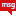
<style>
.page{position:relative;width:16px;height:16px;background:#d21111}
.page>*{position:absolute;margin:0}
.t1{font:7.5px "MyriadPro-Regular";color:#c8e4fc}
</style>
<div class="page">
<p class="t1" style="left:2px;top:3px;width:13px;height:6px">msg</p>
</div>
